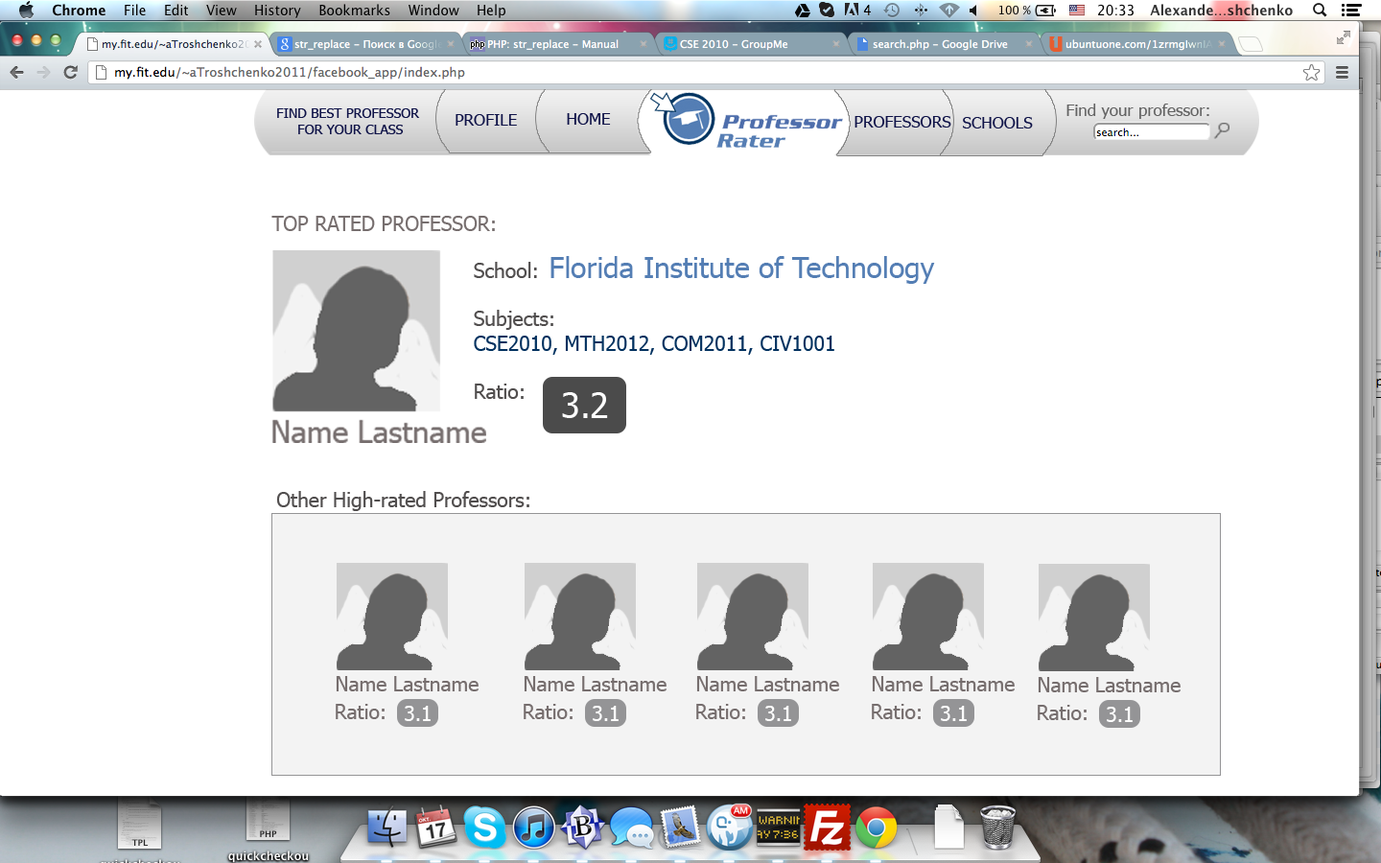
<style>
.page{position:relative;width:1381px;height:863px;background:#ffffff}
.page>*{position:absolute;margin:0}
.t1{font:13.4px "Tahoma";color:#0f1348}
.t2{font:16.3px "Tahoma";color:#0f1348}
.t3{font:16.3px "Tahoma";color:#636363}
.t4{font:20.2px "Tahoma";color:#766e6e}
.t5{font:28.8px "Tahoma";color:#547eb4}
.t6{font:20.2px "Tahoma";color:#00315f}
.t7{font:20.2px "Tahoma";color:#514e4e}
.t8{font:34.5px "Tahoma";color:#ffffff}
</style>
<div class="page">
<p class="t1" style="left:277px;top:108px;width:143px;height:26px">FIND BEST PROFESSOR<br>     FOR YOUR CLASS</p>
<p class="t2" style="left:567px;top:113px;width:44px;height:12px">HOME</p>
<p class="t3" style="left:1067px;top:104px;width:143px;height:15px">Find your professor:</p>
<p class="t2" style="left:456px;top:114px;width:61px;height:12px">PROFILE</p>
<p class="t2" style="left:855px;top:116px;width:97px;height:12px">PROFESSORS</p>
<p class="t2" style="left:963px;top:117px;width:70px;height:12px">SCHOOLS</p>
<p class="t4" style="left:271px;top:216px;width:224px;height:15px">TOP RATED PROFESSOR:</p>
<p class="t5" style="left:551px;top:256px;width:384px;height:28px">Florida Institute of Technology</p>
<p class="t6" style="left:474px;top:262px;width:361px;height:137px"><span class="t7">School:<br><br>Subjects:<br></span>CSE2010, MTH2012, COM2011, CIV1001<br><span class="t7"><br>Ratio:</span></p>
<p class="t8" style="left:562px;top:392px;width:46px;height:26px">3.2</p>
<p class="t7" style="left:276px;top:491px;width:253px;height:20px">Other High-rated Professors:</p>
</div>
